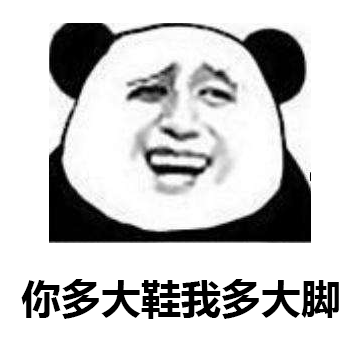
<style>
.page{position:relative;width:360px;height:360px;background:#ffffff}
.page>*{position:absolute;margin:0}
.t1{font:40px "MicrosoftYaHei-Bold";color:#000000}
</style>
<div class="page">
<p class="t1" style="left:21px;top:279px;width:318px;height:40px">你多大鞋我多大脚</p>
</div>
